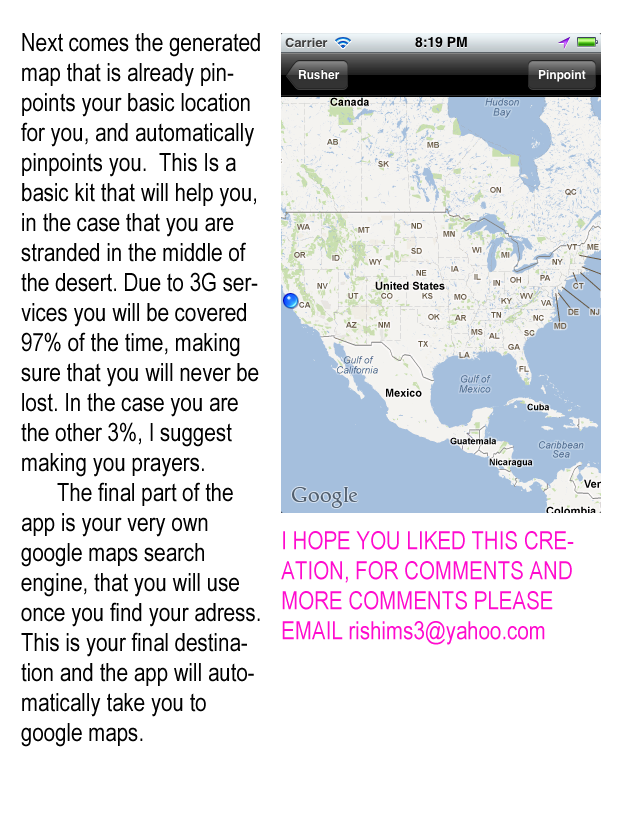
<style>
.page{position:relative;width:640px;height:832px;background:#ffffff}
.page>*{position:absolute;margin:0}
.t1{font:25px "ArialNarrow";color:#000000}
.t2{font:25px "ArialNarrow";color:#ff0bce}
</style>
<div class="page">
<p class="t1" style="left:21px;top:33px;width:239px;height:714px">Next comes the generated map that is already pinpoints your basic location for you, and automatically pinpoints you.  This Is a basic kit that will help you, in the case that you are stranded in the middle of the desert. Due to 3G services you will be covered 97% of the time, making sure that you will never be lost. In the case you are the other 3%, I suggest making you prayers.<br> The final part of the app is your very own google maps search engine, that you will use once you find your adress. This is your final destination and the app will automatically take you to google maps.</p>
<p class="t2" style="left:281px;top:531px;width:293px;height:114px">I HOPE YOU LIKED THIS CREATION, FOR COMMENTS AND MORE COMMENTS PLEASE EMAIL rishims3@yahoo.com</p>
</div>
